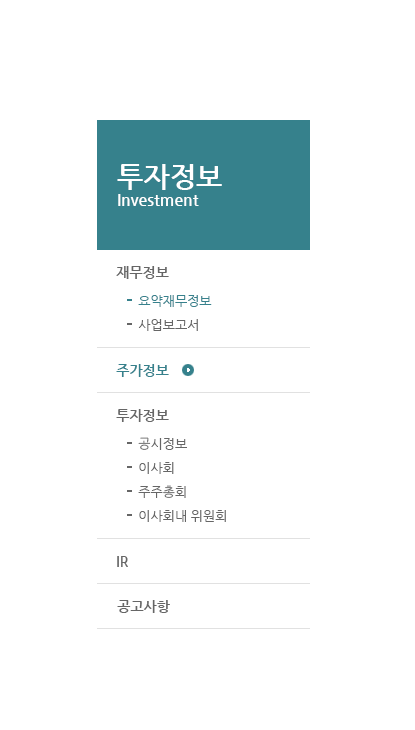
<style>
.page{position:relative;width:415px;height:730px;background:#ffffff}
.page>*{position:absolute;margin:0}
.t1{font:28px "NanumGothicBold";color:#ffffff}
.t2{font:16px "NanumGothicBold";color:#ffffff}
.t3{font:14px "NanumGothicBold";color:#666666}
.t4{font:13px/24px "NanumGothic";color:#36818c}
.t5{font:13px/24px "NanumGothic";color:#666666}
.t6{font:14px "NanumGothicBold";color:#36818c}
</style>
<div class="page">
<p class="t1" style="left:117px;top:164px;width:105px;height:26px">투자정보</p>
<p class="t2" style="left:118px;top:194px;width:81px;height:12px">Investment</p>
<p class="t3" style="left:116px;top:266px;width:53px;height:13px">재무정보</p>
<p class="t4" style="left:138px;top:295px;width:74px;height:36px">요약재무정보<br><span class="t5">사업보고서</span></p>
<p class="t6" style="left:116px;top:364px;width:53px;height:13px">주가정보</p>
<p class="t3" style="left:116px;top:409px;width:53px;height:13px">투자정보</p>
<p class="t5" style="left:138px;top:437px;width:88px;height:85px">공시정보<br>이사회<br>주주총회<br>이사회내 위원회</p>
<p class="t3" style="left:117px;top:556px;width:11px;height:11px">IR</p>
<p class="t3" style="left:117px;top:600px;width:53px;height:13px">공고사항</p>
</div>
